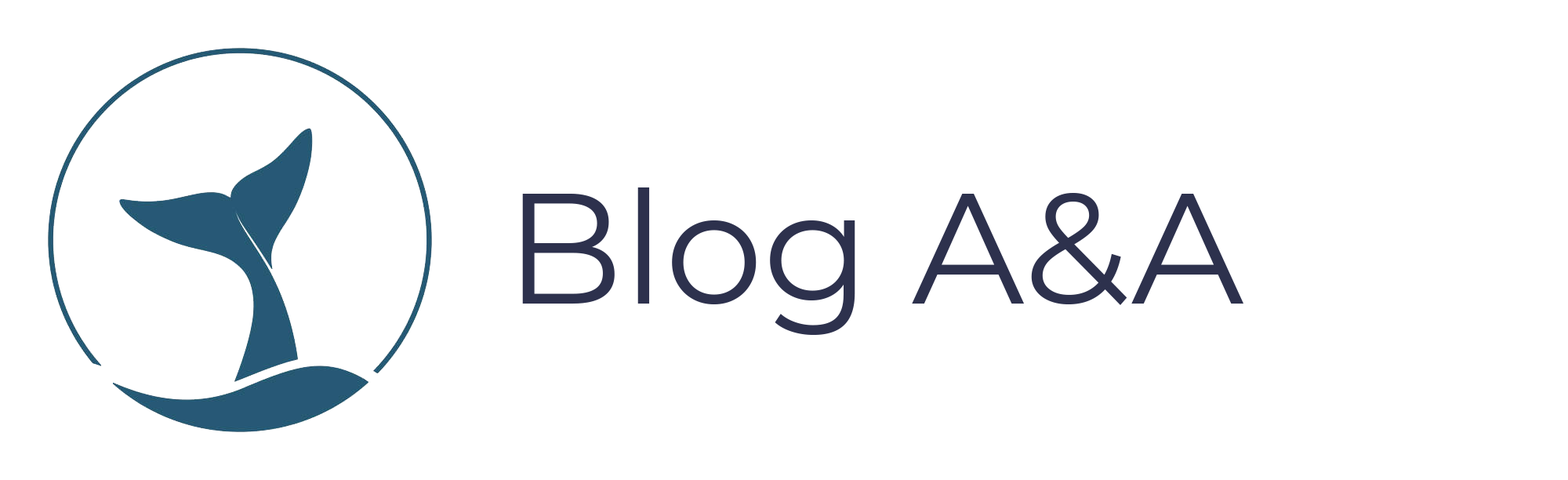
<style>
.page{position:relative;width:1568px;height:480px;background:#ffffff}
.page>*{position:absolute;margin:0}
.t1{font:156.8px "Montserrat-Regular";color:#2d314d}
</style>
<div class="page">
<p class="t1" style="left:522px;top:187px;width:721px;height:148px">Blog A&amp;A</p>
</div>
